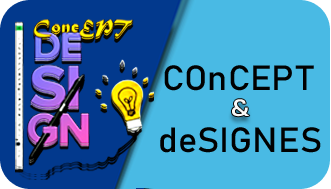
<style>
.page{position:relative;width:331px;height:189px;background:#49bae4}
.page>*{position:absolute;margin:0}
.t1{font:34.5px "Bahnschrift";color:#010101;scale:1.05 1}
.t2{font:23.4px "Bahnschrift";color:#f9f9f7;scale:1.3 1}
.t3{font:34.6px "Bahnschrift";color:#010101;scale:1.05 1}
</style>
<div class="page">
<p class="t1" style="left:164px;top:65px;width:150px;height:26px">COnCEPT</p>
<p class="t2" style="left:232px;top:99px;width:18px;height:18px">&amp;</p>
<p class="t3" style="left:160px;top:127px;width:161px;height:26px">deSIGNES</p>
</div>
